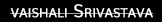
<style>
.page{position:relative;width:162px;height:22px;background:#000000}
.page>*{position:absolute;margin:0}
.t1{font:30px "Muli-Light";color:#ffffff;font-variant:small-caps;font-weight:bold}
</style>
<div class="page">
<p class="t1" style="left:10px;top:4px;width:143px;height:14px">vaishali Srivastava</p>
</div>
